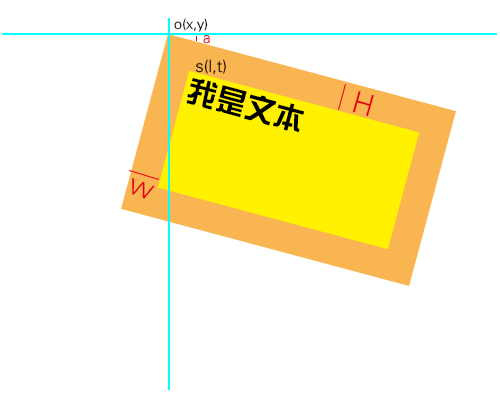
<style>
.page{position:relative;width:500px;height:400px;background:#ffffff}
.page>*{position:absolute;margin:0}
.t1{font:14.3px "FZY1JW--GB1-0";color:#000000}
.t2{font:15.6px "FZY1JW--GB1-0"}
.t3{font:17px "FZY1JW--GB1-0";color:#000000}
.t4{font:30px "HYk1gj";color:#000000}
.t5{font:30px "FZY1JW--GB1-0";color:#e60012}
</style>
<div class="page">
<p class="t1" style="left:174px;top:18px;width:34px;height:14px">o(x,y)</p>
<p class="t2" style="left:203px;top:34px;width:7px;height:10px">a</p>
<p class="t3" style="left:196px;top:59px;width:30px;height:16px">s(l,t)</p>
<p class="t4" style="left:186px;top:78px;width:119px;height:55px;rotate:15deg">我是文本</p>
<p class="t5" style="left:352px;top:91px;width:22px;height:26px;rotate:16deg">H</p>
<p class="t5" style="left:132px;top:178px;width:23px;height:21px;rotate:20deg">w</p>
</div>
